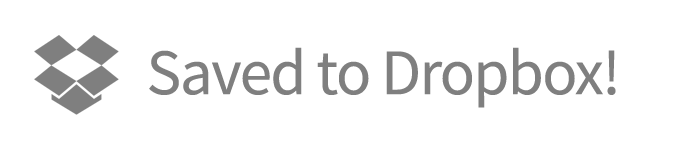
<style>
.page{position:relative;width:690px;height:150px;background:#ffffff}
.page>*{position:absolute;margin:0}
.t1{font:65px "SourceSansPro-Regular";letter-spacing:-0.025em;color:#7f7f7f}
</style>
<div class="page">
<p class="t1" style="left:149px;top:47px;width:467px;height:61px">Saved to Dropbox!</p>
</div>
